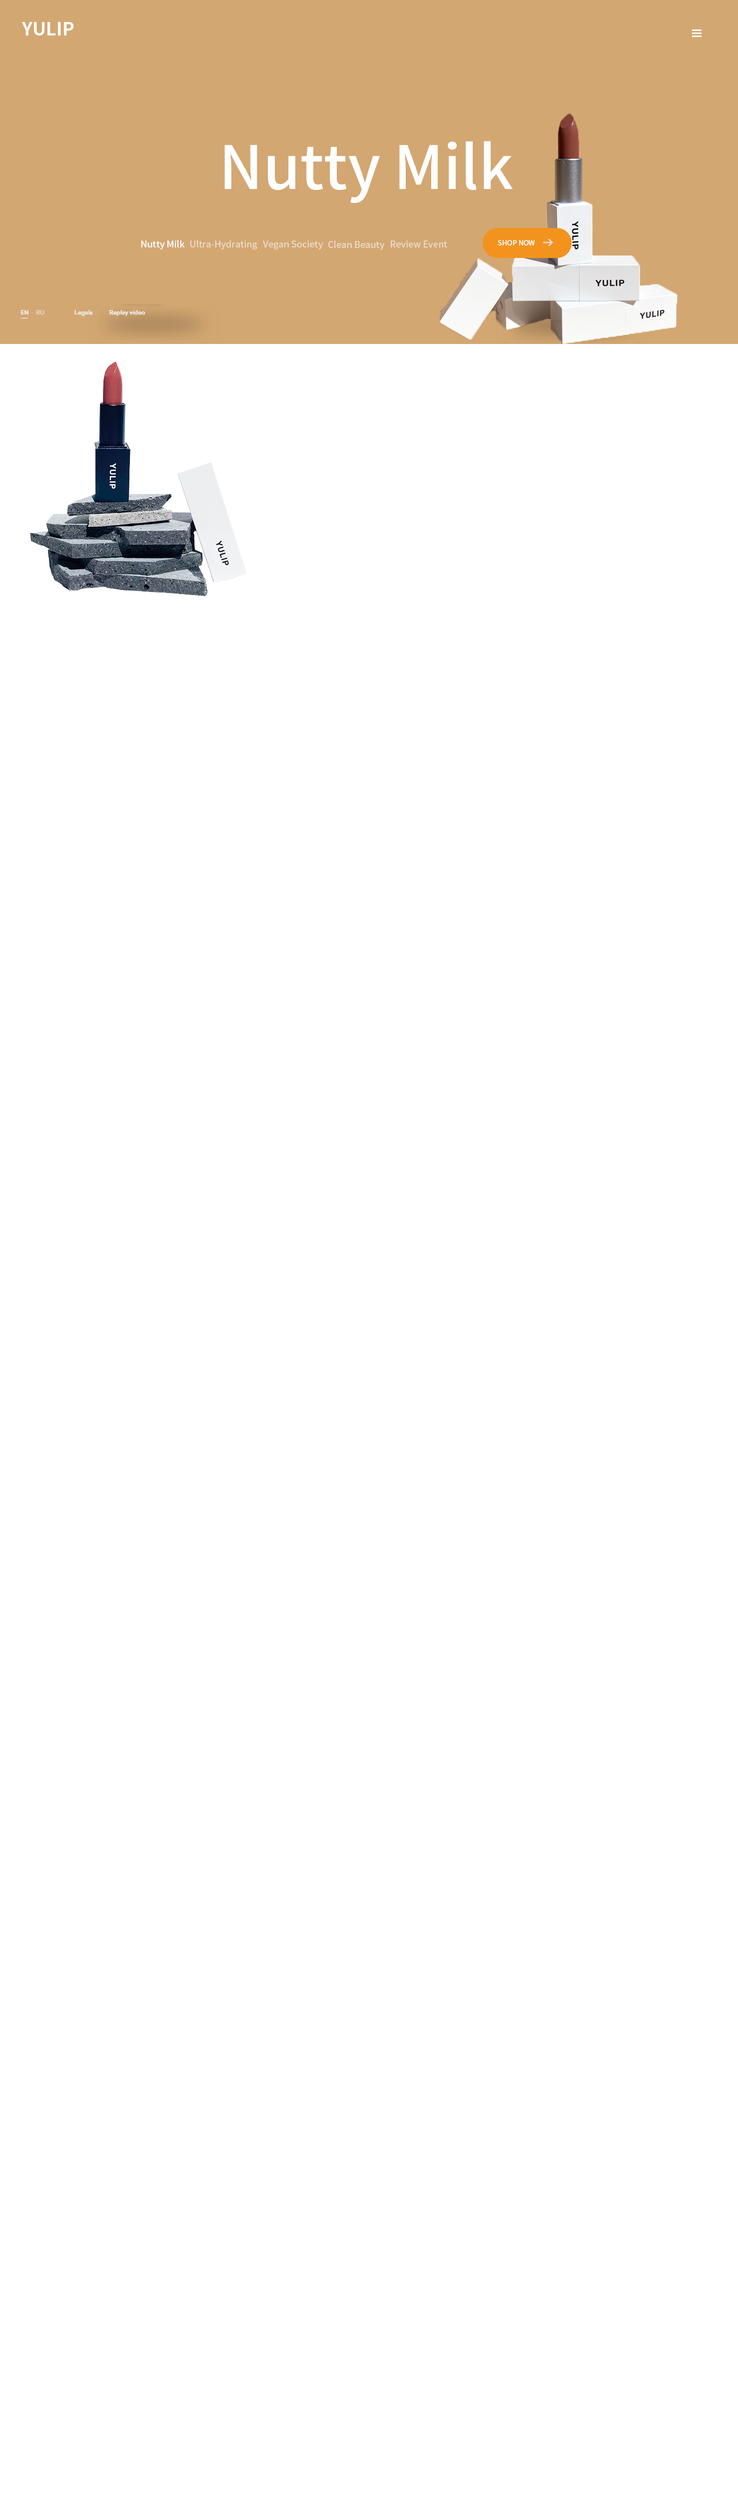
<style>
.page{position:relative;width:738px;height:2500px;background:#ffffff}
.page>*{position:absolute;margin:0}
.t1{font:18px "NotoSansKR-Bold";color:#ffffff}
.t2{font:60px "NotoSansKR-Medium";color:#ffffff}
.t3{font:9px "NotoSansKR-Medium";letter-spacing:-0.001em;color:#ffffff}
.t4{font:9px "NotoSansKR-Medium";letter-spacing:-0.001em;color:#eadaca}
.t5{font:7px "NotoSansKR-Medium";letter-spacing:-0.001em;color:#ffffff}
</style>
<div class="page">
<p class="t1" style="left:22px;top:22px;width:52px;height:14px">YULIP</p>
<p class="t2" style="left:224px;top:141px;width:290px;height:63px">Nutty Milk</p>
<p class="t3" style="left:141px;top:240px;width:44px;height:10px">Nutty Milk</p>
<p class="t4" style="left:190px;top:240px;width:68px;height:10px">Ultra-Hydrating</p>
<p class="t4" style="left:263px;top:240px;width:61px;height:10px">Vegan Society</p>
<p class="t4" style="left:328px;top:240px;width:57px;height:10px">Clean Beauty</p>
<p class="t4" style="left:391px;top:240px;width:57px;height:8px">Review Event</p>
<p class="t5" style="left:498px;top:240px;width:37px;height:6px">SHOP NOW</p>
</div>
